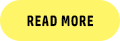
<style>
.page{position:relative;width:120px;height:41px;background:#fff568}
.page>*{position:absolute;margin:0}
.t1{font:15px "HPSimplified-Bold";letter-spacing:0.05em;color:#000000;text-transform:uppercase;scale:0.83 1}
</style>
<div class="page">
<p class="t1" style="left:27px;top:15px;width:67px;height:12px">Read More</p>
</div>
